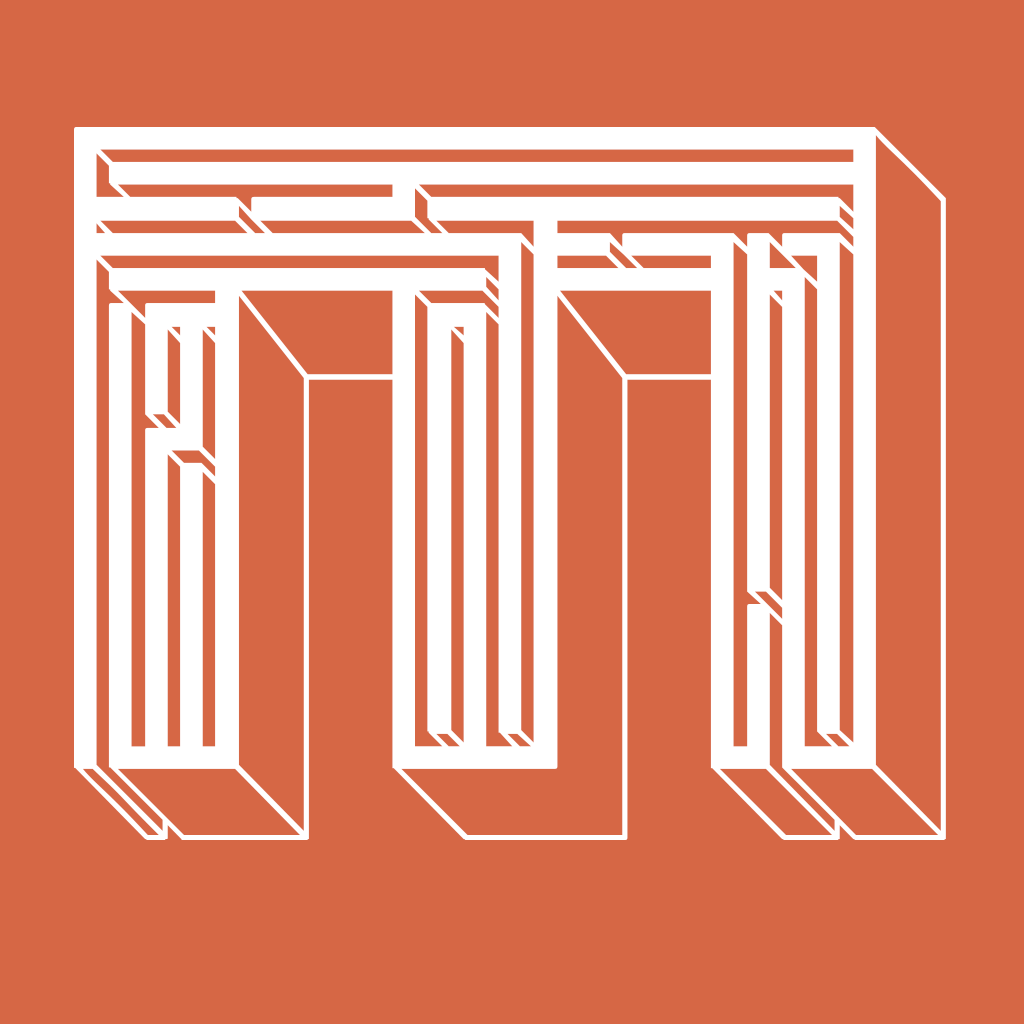
<style>
.page{position:relative;width:1024px;height:1024px;background:#d66745}
.page>*{position:absolute;margin:0}
.t1{font:1249px "Maze-Bold";color:#ffffff}
</style>
<div class="page">
<p class="t1" style="left:74px;top:127px;width:872px;height:713px">m</p>
</div>
